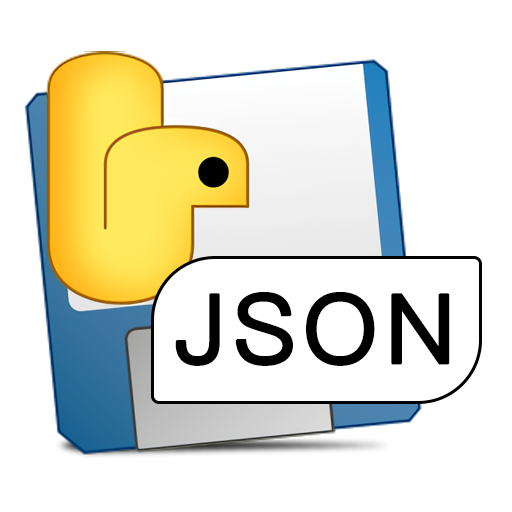
<style>
.page{position:relative;width:512px;height:512px;background:#ffffff}
.page>*{position:absolute;margin:0}
.t1{font:96px "PingFangSC-Regular";letter-spacing:0.064em;color:#000000;font-weight:bold}
</style>
<div class="page">
<p class="t1" style="left:175px;top:292px;width:275px;height:74px">JSON</p>
</div>
